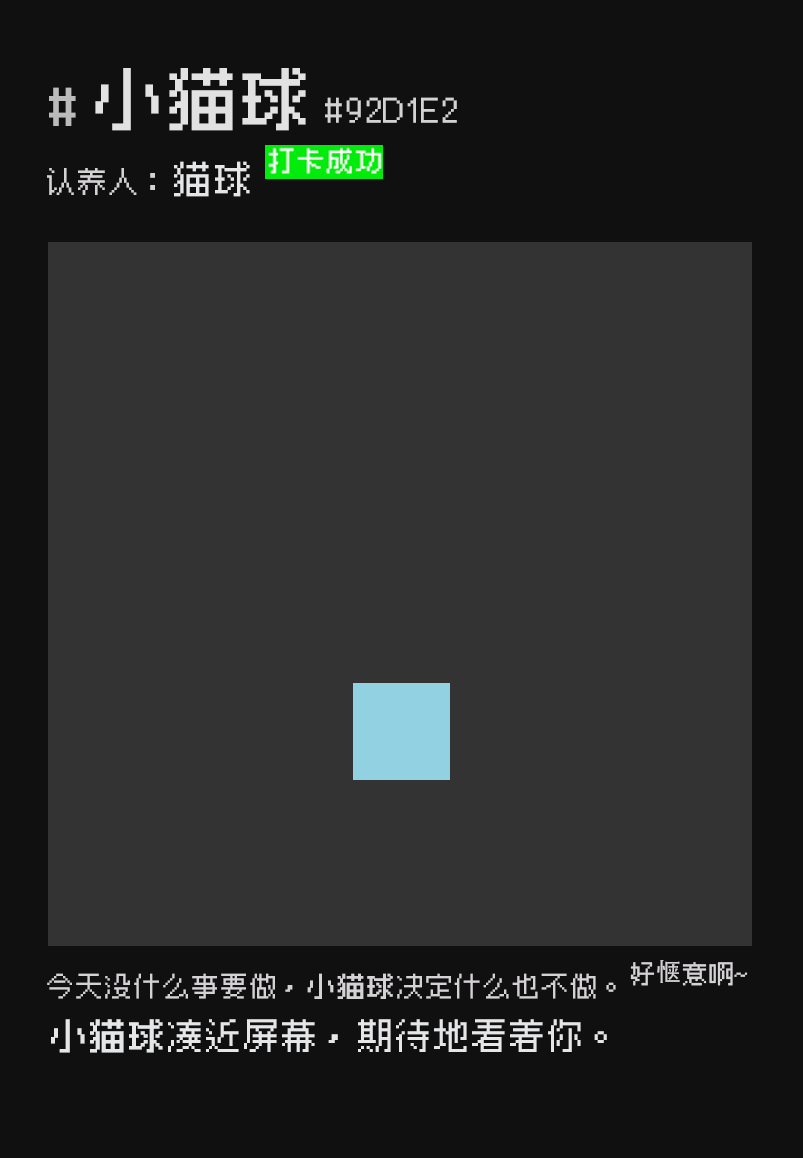
<style>
.page{position:relative;width:803px;height:1158px;background:#333333}
.page>*{position:absolute;margin:0}
.t1{font:66.7px "Cubic_11";letter-spacing:-0.01em;color:#e2e2e2;font-weight:bold}
.t2{font:12px "Cubic_11";letter-spacing:-0.01em;color:#bcbbbb;font-weight:bold}
.t3{font:33.3px "Cubic_11";letter-spacing:-0.01em;color:#d5d2d6}
.t4{font:37.5px "Cubic_11";letter-spacing:-0.01em;color:#e5e6e7}
.t5{font:29.2px "Cubic_11";letter-spacing:-0.01em;color:#d5d2d6}
.t6{font:25px "Cubic_11";letter-spacing:-0.01em;color:#d5d2d6}
.t7{font:25px "AdobeHeitiStd-Regular";letter-spacing:-0.01em;color:#d5d2d6}
.t8{font:27px "Cubic_11";letter-spacing:-0.01em;color:#d5d2d6}
.t9{font:27px "Cubic_11";letter-spacing:-0.01em;color:#d5d2d6;font-weight:bold}
.t10{font:35.4px "Cubic_11";letter-spacing:-0.01em;color:#e5e6e7}
.t11{font:35.4px "Cubic_11";letter-spacing:-0.01em;color:#e5e6e7;font-weight:bold}
</style>
<div class="page">
<p class="t1" style="left:95px;top:68px;width:211px;height:63px">小猫球</p>
<p class="t2" style="left:49px;top:87px;width:27px;height:39px">#</p>
<p class="t3" style="left:325px;top:97px;width:132px;height:26px">#92D1E2</p>
<p class="t4" style="left:174px;top:161px;width:76px;height:36px">猫球</p>
<p class="t5" style="left:47px;top:168px;width:108px;height:27px">认养人：</p>
<p class="t6" style="left:630px;top:960px;width:118px;height:26px">好<span class="t7">惬</span>意啊~</p>
<p class="t8" style="left:47px;top:973px;width:569px;height:26px">今天没什么事要做，<span class="t9">小猫球</span>决定什么也不做。</p>
<p class="t10" style="left:51px;top:1019px;width:556px;height:34px"><span class="t11">小猫球</span>凑近屏幕，期待地看着你。</p>
</div>
